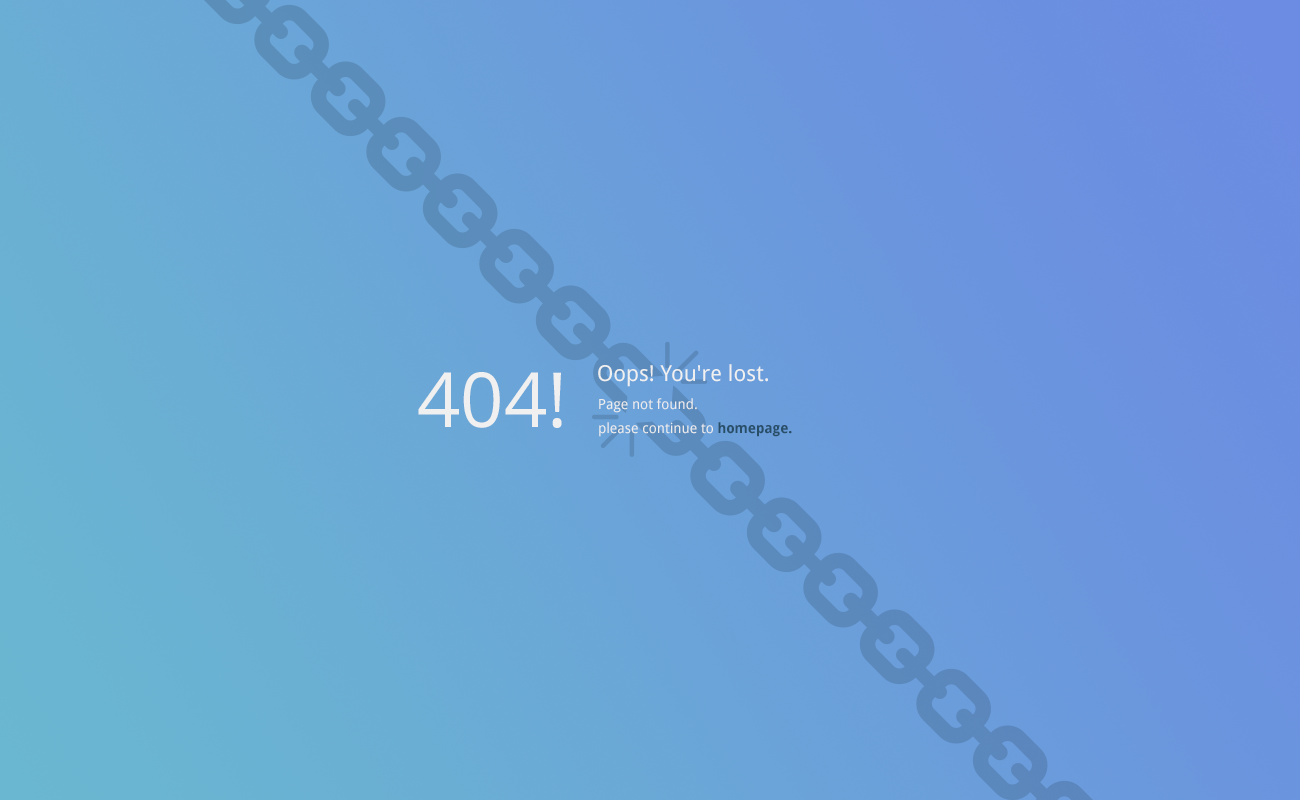
<style>
.page{position:relative;width:1300px;height:800px}
.page>*{position:absolute;margin:0}
.t1{font:22px "DroidSans";color:#f0f0f0}
.t2{font:76px "OpenSans";color:#efefef}
.t3{font:14px/24px "DroidSans";color:#ededed}
.t4{font:14px/24px "DroidSans-Bold";color:#294e68}
</style>
<div class="page">
<p class="t1" style="left:598px;top:364px;width:170px;height:23px">Oops! You're lost.</p>
<p class="t2" style="left:418px;top:372px;width:144px;height:56px">404!</p>
<p class="t3" style="left:599px;top:398px;width:193px;height:39px">Page not found.<br>please continue to <span class="t4">homepage.</span></p>
</div>
